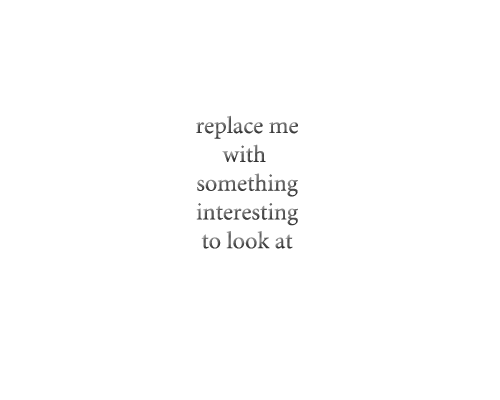
<style>
.page{position:relative;width:500px;height:400px;background:#ffffff}
.page>*{position:absolute;margin:0}
.t1{font:24px "Minion-Regular";color:#5a5a5a}
</style>
<div class="page">
<p class="t1" style="left:196px;top:115px;width:102px;height:134px;text-align:center">replace me<br>with <br>something<br>interesting<br>to look at</p>
</div>
